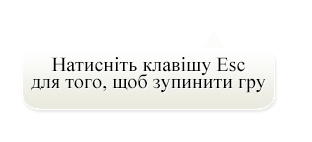
<style>
.page{position:relative;width:312px;height:142px;background:#ffffff}
.page>*{position:absolute;margin:0}
.t1{font:20px/16.7px "TimesNewRomanPSMT";color:#000000}
</style>
<div class="page">
<p class="t1" style="left:31px;top:57px;width:235px;height:36px;text-align:center">Натисніть клавішу Esc <br>для того, щоб зупинити гру</p>
</div>
